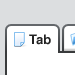
<style>
.page{position:relative;width:75px;height:75px;background:#ffffff}
.page>*{position:absolute;margin:0}
.t1{font:13px "Helvetica-Bold";color:#222222}
</style>
<div class="page">
<p class="t1" style="left:29px;top:34px;width:22px;height:11px">Tab</p>
</div>
